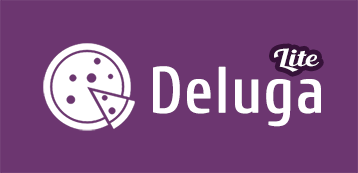
<style>
.page{position:relative;width:358px;height:173px;background:#6c3670}
.page>*{position:absolute;margin:0}
.t1{font:23.2px "BlendaScript";color:#ffffff;scale:1.34 1}
.t2{font:64.4px "Cuprum-Regular";color:#ffffff;font-weight:bold}
</style>
<div class="page">
<p class="t1" style="left:274px;top:48px;width:45px;height:24px">Lite</p>
<p class="t2" style="left:153px;top:66px;width:168px;height:61px">Deluga</p>
</div>
